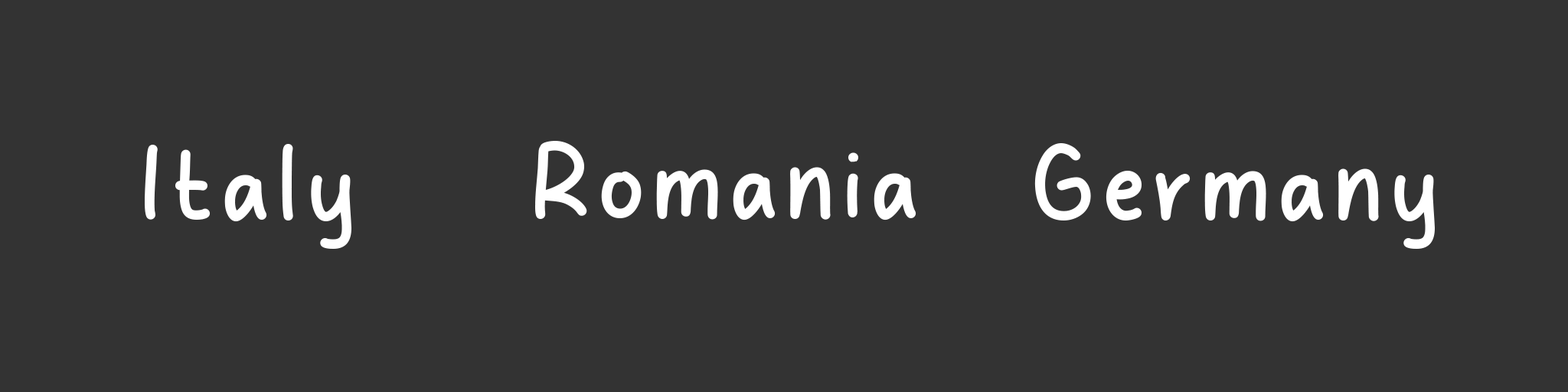
<style>
.page{position:relative;width:1568px;height:392px;background:#333333}
.page>*{position:absolute;margin:0}
.t1{font:106px "OverLight";letter-spacing:0.1em;color:#ffffff}
</style>
<div class="page">
<p class="t1" style="left:145px;top:144px;width:206px;height:105px">Italy</p>
<p class="t1" style="left:535px;top:141px;width:381px;height:79px">Romania</p>
<p class="t1" style="left:1034px;top:143px;width:401px;height:106px">Germany</p>
</div>
